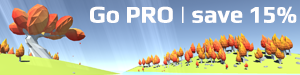
<style>
.page{position:relative;width:300px;height:75px}
.page>*{position:absolute;margin:0}
.t1{font:24px "Play-Bold";color:#fffefe}
</style>
<div class="page">
<p class="t1" style="left:90px;top:6px;width:207px;height:17px">Go PRO | save 15%</p>
</div>
